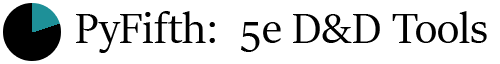
<style>
.page{position:relative;width:500px;height:64px;background:#ffffff}
.page>*{position:absolute;margin:0}
.t1{font:48px "SitkaBanner";color:#000000}
</style>
<div class="page">
<p class="t1" style="left:76px;top:11px;width:411px;height:42px">PyFifth:  5e D&amp;D Tools</p>
</div>
